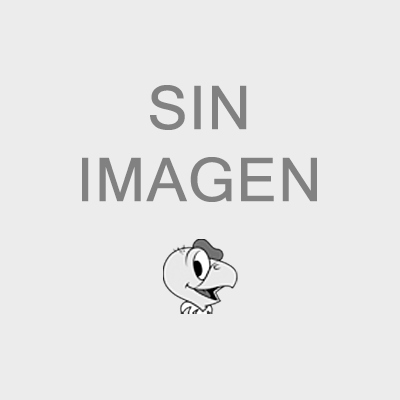
<style>
.page{position:relative;width:400px;height:400px;background:#ececec}
.page>*{position:absolute;margin:0}
.t1{font:60px "MicrosoftSansSerif";color:#818181;font-weight:bold}
</style>
<div class="page">
<p class="t1" style="left:82px;top:85px;width:235px;height:117px;text-align:center">SIN<br>IMAGEN</p>
</div>
